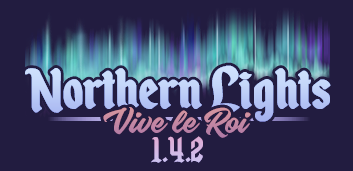
<style>
.page{position:relative;width:353px;height:171px;background:#221c40}
.page>*{position:absolute;margin:0}
.t1{font:67px "EnchantedLand";letter-spacing:-0.01em;color:#becff7;font-weight:bold}
.t2{font:43.5px "KnightBrushDemo";letter-spacing:-0.01em;color:#c287a4}
.t3{font:42.7px "EnchantedLand";letter-spacing:-0.01em;color:#d4b7e3}
</style>
<div class="page">
<p class="t1" style="left:25px;top:65px;width:306px;height:57px">Northern Lights</p>
<p class="t2" style="left:103px;top:107px;width:148px;height:31px">Vive le Roi</p>
<p class="t2" style="left:103px;top:107px;width:148px;height:31px">Vive le Roi</p>
<p class="t3" style="left:151px;top:136px;width:52px;height:27px">1.4.2</p>
</div>
